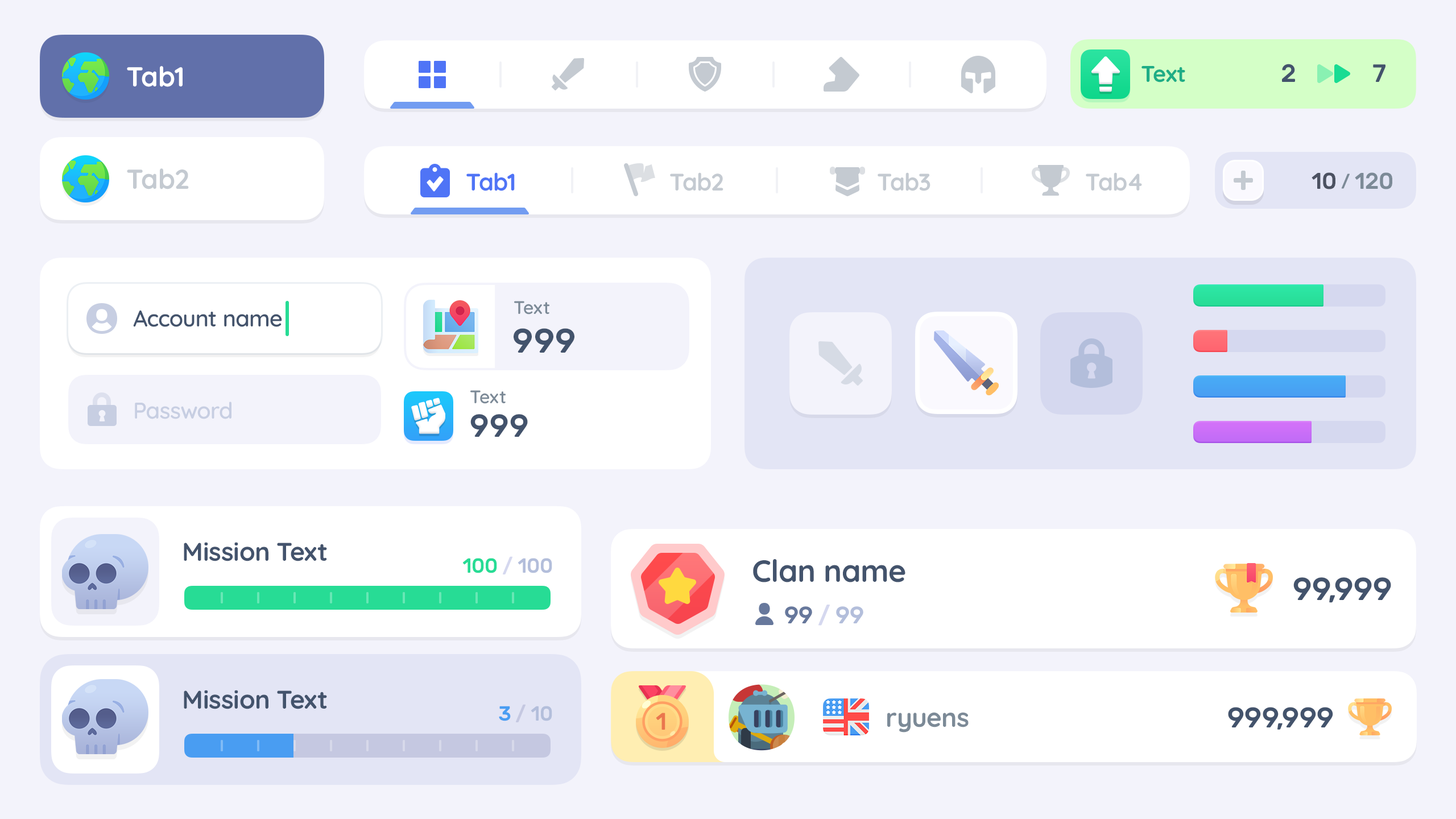
<style>
.page{position:relative;width:1456px;height:819px;background:#f3f3fb}
.page>*{position:absolute;margin:0}
.t1{font:27.3px "Quicksand-Bold";color:#ffffff}
.t2{font:22.7px "Quicksand-Bold";letter-spacing:-0.01em;color:#1ead86}
.t3{font:25px "Rubik-Medium";color:#43536c}
.t4{font:27.3px "Quicksand-Bold";color:#c4cad1}
.t5{font:23.9px "Quicksand-Bold";letter-spacing:-0.01em;color:#4f74f6}
.t6{font:23.9px "Quicksand-Bold";letter-spacing:-0.01em;color:#c4cad1}
.t7{font:22.7px "Rubik-Medium";letter-spacing:-0.01em;color:#7c8a97}
.t8{font:22.7px "Rubik-Medium";letter-spacing:-0.01em;color:#4b5161}
.t9{font:17.1px "Rubik-Medium";letter-spacing:-0.01em;color:#7c8a97}
.t10{font:18.2px "Quicksand-SemiBold";color:#7c8a97}
.t11{font:22.7px "Quicksand-SemiBold";letter-spacing:-0.01em;color:#43536c}
.t12{font:34.1px "Rubik-Medium";color:#43536c;text-transform:uppercase}
.t13{font:22.7px "Quicksand-SemiBold";letter-spacing:-0.01em;color:#c7cee2}
.t14{font:31.8px "Rubik-Medium";color:#43536c;text-transform:uppercase}
.t15{font:25.6px "Quicksand-Bold";letter-spacing:-0.01em;color:#43536c}
.t16{font:20.5px "Rubik-Medium";letter-spacing:-0.01em;color:#27dc95}
.t17{font:20.5px "Rubik-Medium";letter-spacing:-0.01em;color:#d5d8ef}
.t18{font:20.5px "Rubik-Medium";letter-spacing:-0.01em;color:#b3bedb}
.t19{font:30.7px "Quicksand-Bold";letter-spacing:-0.01em;color:#43536c}
.t20{font:31.8px "Rubik-Medium";letter-spacing:-0.01em;color:#43536c}
.t21{font:23.9px "Rubik-Medium";letter-spacing:-0.01em;color:#67789c}
.t22{font:23.9px "Rubik-Medium";letter-spacing:-0.01em;color:#d5d8ef}
.t23{font:23.9px "Rubik-Medium";letter-spacing:-0.01em;color:#b3bedb}
.t24{font:20.5px "Rubik-Medium";letter-spacing:-0.01em;color:#499df2}
.t25{font:20.5px "Rubik-Medium";letter-spacing:-0.01em;color:#c5c8e1}
.t26{font:23.9px "Rubik-Medium";letter-spacing:-0.01em;color:#ea764e}
.t27{font:26.2px "Quicksand-Bold";letter-spacing:-0.01em;color:#7c8a97}
.t28{font:28.4px "Rubik-Medium";letter-spacing:-0.01em;color:#43536c}
</style>
<div class="page">
<p class="t1" style="left:127px;top:66px;width:56px;height:21px">Tab1</p>
<p class="t2" style="left:1141px;top:66px;width:44px;height:16px">Text</p>
<p class="t3" style="left:1282px;top:64px;width:13px;height:18px">2</p>
<p class="t3" style="left:1373px;top:64px;width:12px;height:18px">7</p>
<p class="t4" style="left:127px;top:168px;width:62px;height:21px">Tab2</p>
<p class="t5" style="left:466px;top:172px;width:49px;height:19px">Tab1</p>
<p class="t6" style="left:670px;top:172px;width:53px;height:19px">Tab2</p>
<p class="t6" style="left:878px;top:172px;width:52px;height:19px">Tab3</p>
<p class="t6" style="left:1086px;top:172px;width:56px;height:19px">Tab4</p>
<p class="t7" style="left:1312px;top:172px;width:80px;height:17px"><span class="t8">10 </span><span class="t9">/</span> 120</p>
<p class="t10" style="left:514px;top:301px;width:35px;height:14px">Text</p>
<p class="t11" style="left:133px;top:310px;width:149px;height:17px">Account name</p>
<p class="t12" style="left:514px;top:328px;width:60px;height:25px">999</p>
<p class="t13" style="left:135px;top:402px;width:96px;height:17px">Password</p>
<p class="t10" style="left:470px;top:390px;width:36px;height:14px">Text</p>
<p class="t14" style="left:470px;top:414px;width:58px;height:23px">999</p>
<p class="t15" style="left:184px;top:542px;width:143px;height:19px">Mission Text</p>
<p class="t16" style="left:462px;top:556px;width:90px;height:18px">100 <span class="t17">/ </span><span class="t18">100</span></p>
<p class="t19" style="left:753px;top:559px;width:152px;height:23px">Clan name</p>
<p class="t20" style="left:1293px;top:577px;width:98px;height:26px">99,999</p>
<p class="t21" style="left:785px;top:605px;width:78px;height:21px">99 <span class="t22">/ </span><span class="t23">99</span></p>
<p class="t15" style="left:184px;top:690px;width:143px;height:19px">Mission Text</p>
<p class="t18" style="left:499px;top:704px;width:53px;height:18px"><span class="t24">3 </span><span class="t25">/</span> 10</p>
<p class="t26" style="left:656px;top:713px;width:9px;height:17px">1</p>
<p class="t27" style="left:887px;top:712px;width:82px;height:21px">ryuens</p>
<p class="t28" style="left:1228px;top:707px;width:105px;height:23px">999,999</p>
</div>
